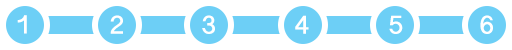
<style>
.page{position:relative;width:512px;height:50px;background:#ffffff}
.page>*{position:absolute;margin:0}
.t1{font:30px "OriyaSangamMN-Bold";color:#ffffff}
</style>
<div class="page">
<p class="t1" style="left:17px;top:15px;width:10px;height:19px">1</p>
<p class="t1" style="left:110px;top:15px;width:13px;height:19px">2</p>
<p class="t1" style="left:202px;top:15px;width:13px;height:19px">3</p>
<p class="t1" style="left:295px;top:15px;width:14px;height:19px">4</p>
<p class="t1" style="left:389px;top:15px;width:14px;height:19px">5</p>
<p class="t1" style="left:480px;top:15px;width:13px;height:19px">6</p>
</div>
